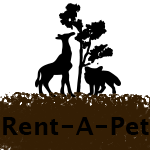
<style>
.page{position:relative;width:150px;height:150px;background:#ffffff}
.page>*{position:absolute;margin:0}
.t1{font:25px "LucidaGrande-Bold";color:#000000}
</style>
<div class="page">
<p class="t1" style="left:3px;top:117px;width:146px;height:18px">Rent-A-Pet</p>
</div>
